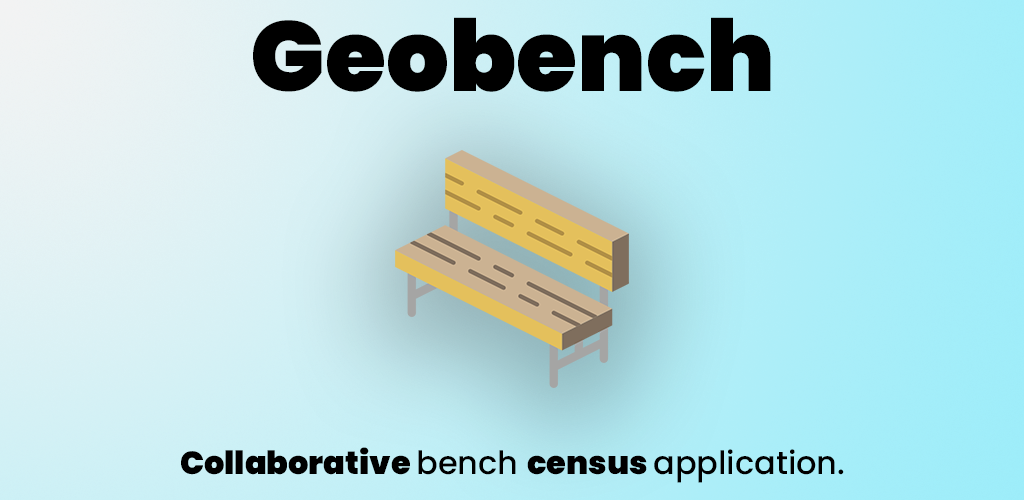
<style>
.page{position:relative;width:1024px;height:500px}
.page>*{position:absolute;margin:0}
.t1{font:99px "Poppins-Black";color:#000000}
.t2{font:32px "Poppins-Black";color:#000000}
.t3{font:32px "Poppins-Medium";color:#000000}
</style>
<div class="page">
<p class="t1" style="left:253px;top:17px;width:518px;height:75px">Geobench</p>
<p class="t2" style="left:181px;top:447px;width:663px;height:36px">Collaborative <span class="t3">bench </span>census <span class="t3">application.</span></p>
</div>
